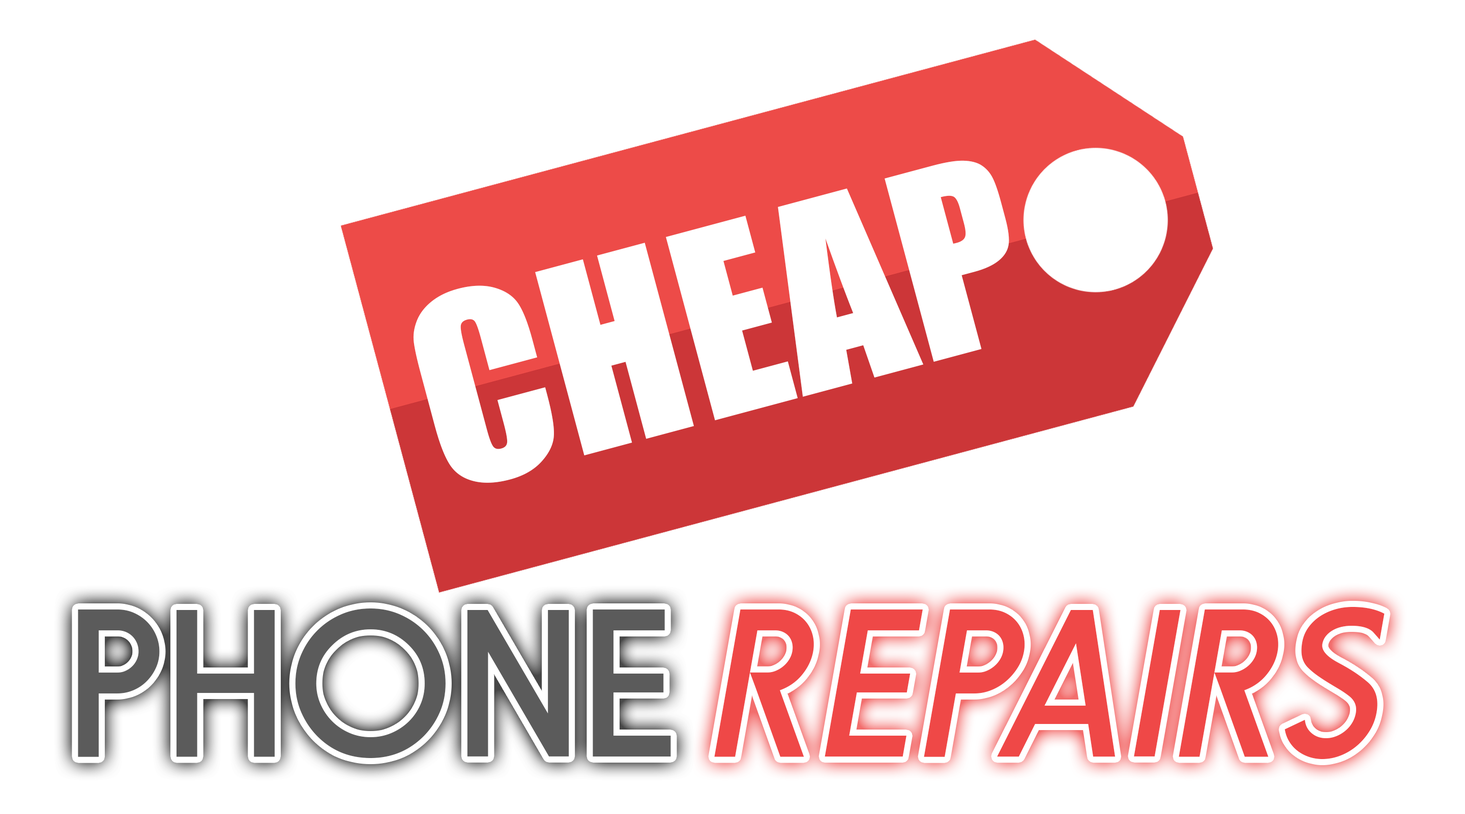
<style>
.page{position:relative;width:1465px;height:814px;background:#ffffff}
.page>*{position:absolute;margin:0}
.t1{font:239.9px "Impact";letter-spacing:0.01em;color:#ffffff}
.t2{font:206.5px "FundamentalBrigade";letter-spacing:0.04em;color:#5b5b5b}
.t3{font:206.5px "FundamentalBrigade";letter-spacing:0.04em;color:#ef4847;font-style:italic}
</style>
<div class="page">
<p class="t1" style="left:413px;top:160px;width:596px;height:323px;rotate:-15deg">CHEAP</p>
<p class="t2" style="left:78px;top:608px;width:593px;height:150px">PHONE</p>
<p class="t3" style="left:714px;top:607px;width:671px;height:152px">REPAIRS</p>
</div>
